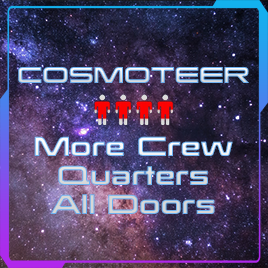
<style>
.page{position:relative;width:268px;height:268px}
.page>*{position:absolute;margin:0}
.t1{font:20px "MassEffect123"}
.t2{font:24px "MassEffect123"}
</style>
<div class="page">
<p class="t1" style="left:18px;top:67px;width:231px;height:16px">COSMOTEER</p>
<p class="t2" style="left:34px;top:136px;width:199px;height:78px;text-align:center">More Crew<br>Quarters<br>All Doors</p>
</div>
